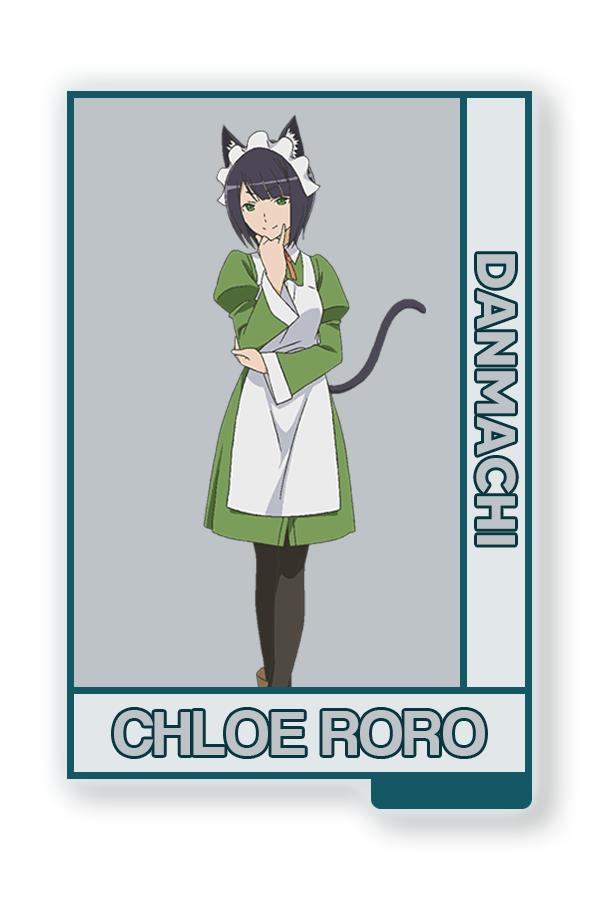
<style>
.page{position:relative;width:600px;height:900px;background:#bdc3c6}
.page>*{position:absolute;margin:0}
.t1{font:54.4px "MADETOMMY-Bold";color:#bdc3c6}
.t2{font:66.2px "CoolveticaRg-Regular";color:#bdc3c6}
</style>
<div class="page">
<p class="t1" style="left:476px;top:254px;width:40px;height:291px;rotate:90deg">DANMACHI</p>
<p class="t2" style="left:114px;top:710px;width:371px;height:46px">CHLOE RORO</p>
</div>
